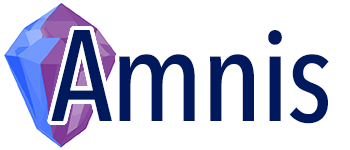
<style>
.page{position:relative;width:350px;height:150px;background:#ffffff}
.page>*{position:absolute;margin:0}
.t1{font:128px "AvenirNextCondensed-Medium";letter-spacing:-0.02em;color:#00185c}
</style>
<div class="page">
<p class="t1" style="left:51px;top:30px;width:278px;height:94px">Amnis</p>
</div>
